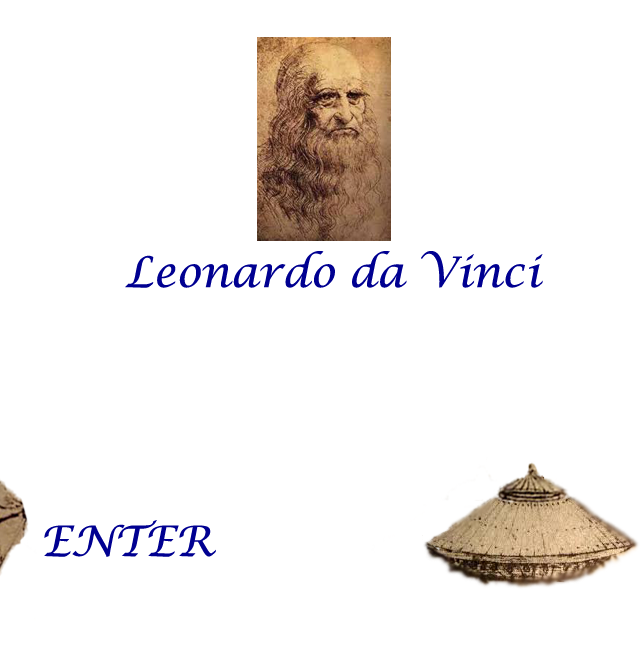
<style>
.page{position:relative;width:641px;height:648px;background:#ffffff}
.page>*{position:absolute;margin:0}
.t1{font:42px "LucidaCalligraphy-Italic";color:#000091}
</style>
<div class="page">
<p class="t1" style="left:125px;top:251px;width:418px;height:37px">Leonardo da Vinci</p>
<p class="t1" style="left:44px;top:520px;width:172px;height:37px">ENTER</p>
</div>
